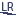
<style>
.page{position:relative;width:16px;height:16px;background:#ffffff}
.page>*{position:absolute;margin:0}
.t1{font:12px "MyriadPro-Regular";color:#333e6a}
</style>
<div class="page">
<p class="t1" style="left:2px;top:2px;width:12px;height:9px">LR</p>
</div>
